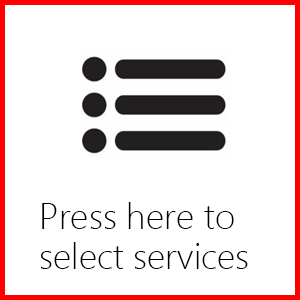
<style>
.page{position:relative;width:300px;height:300px;background:#ffffff}
.page>*{position:absolute;margin:0}
.t1{font:36px/40px "SegoeUI-Light";color:#000000}
</style>
<div class="page">
<p class="t1" style="left:40px;top:202px;width:208px;height:67px">Press here to <br>select services</p>
</div>
